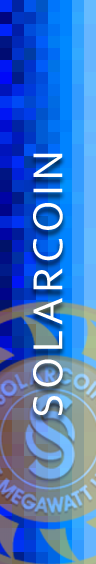
<style>
.page{position:relative;width:96px;height:564px}
.page>*{position:absolute;margin:0}
.t1{font:43.9px "Corbel";letter-spacing:0.1em;color:#ffffff}
</style>
<div class="page">
<p class="t1" style="left:33px;top:153px;width:30px;height:262px;rotate:-90deg">SOLARCOIN</p>
</div>
